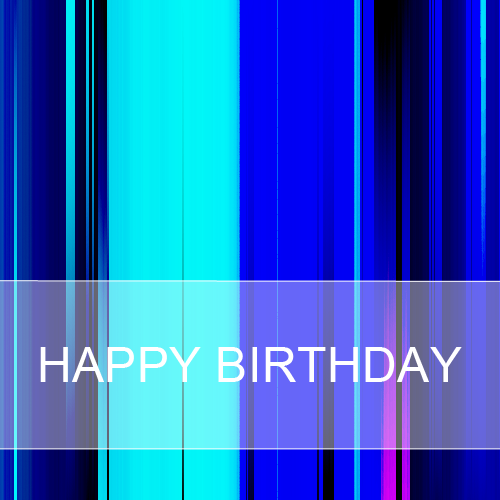
<style>
.page{position:relative;width:500px;height:500px}
.page>*{position:absolute;margin:0}
.t1{font:48px "ArialMT";letter-spacing:0.01em;color:#ffffff;text-transform:uppercase}
</style>
<div class="page">
<p class="t1" style="left:40px;top:347px;width:422px;height:35px">happy birthday</p>
</div>
